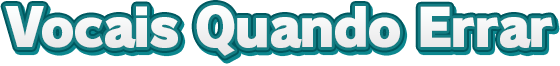
<style>
.page{position:relative;width:560px;height:66px;background:#ffffff}
.page>*{position:absolute;margin:0}
.t1{font:52px "RodinPro-UB";letter-spacing:-0.039em;color:#f1f2f2}
</style>
<div class="page">
<p class="t1" style="left:5px;top:5px;width:548px;height:51px">Vocais Quando Errar</p>
</div>
